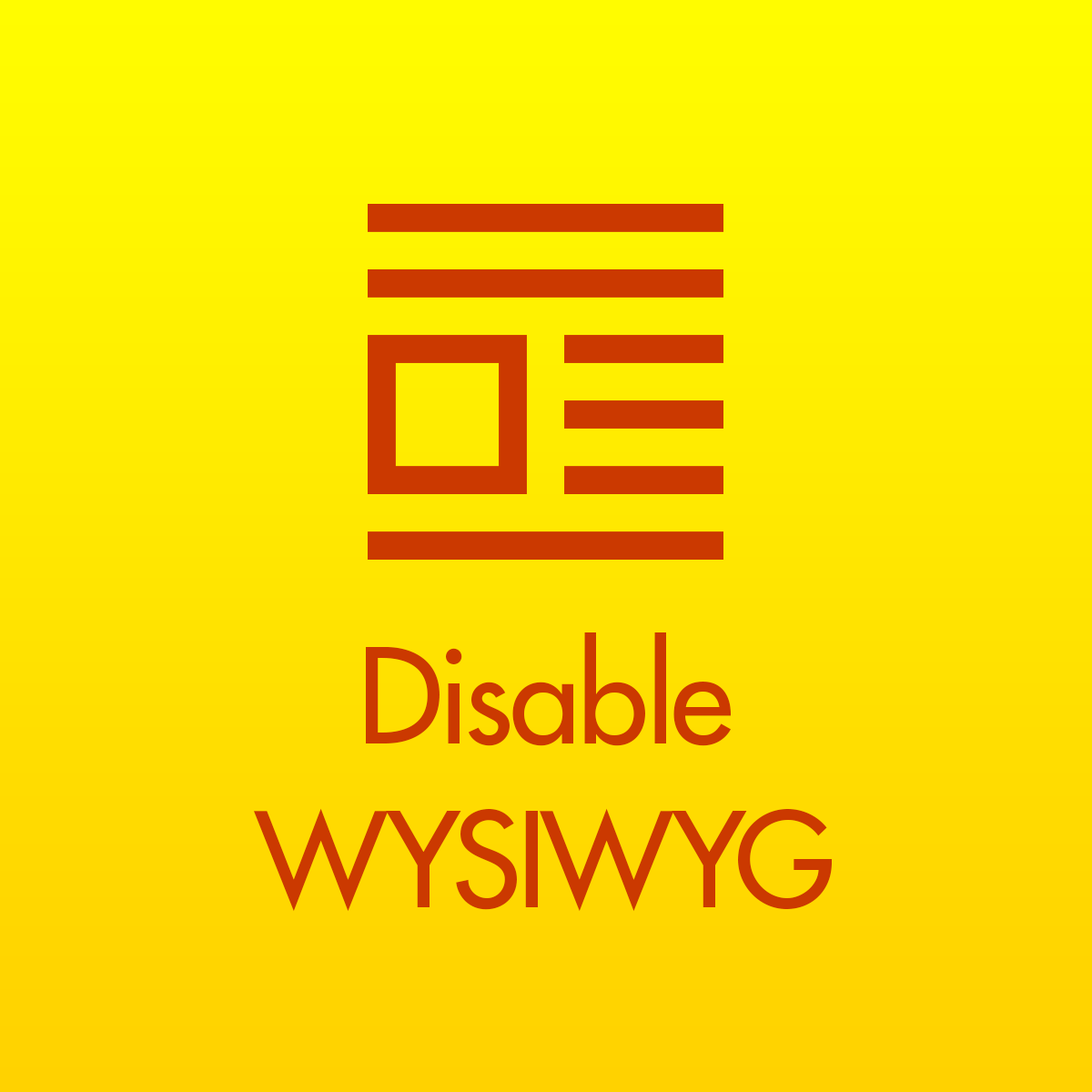
<style>
.page{position:relative;width:1092px;height:1092px}
.page>*{position:absolute;margin:0}
.t1{font:127.4px/163.8px "FuturaLTPro-Medium";color:#cb3900}
</style>
<div class="page">
<p class="t1" style="left:254px;top:632px;width:578px;height:280px;text-align:center">Disable<br>WYSIWYG</p>
</div>
